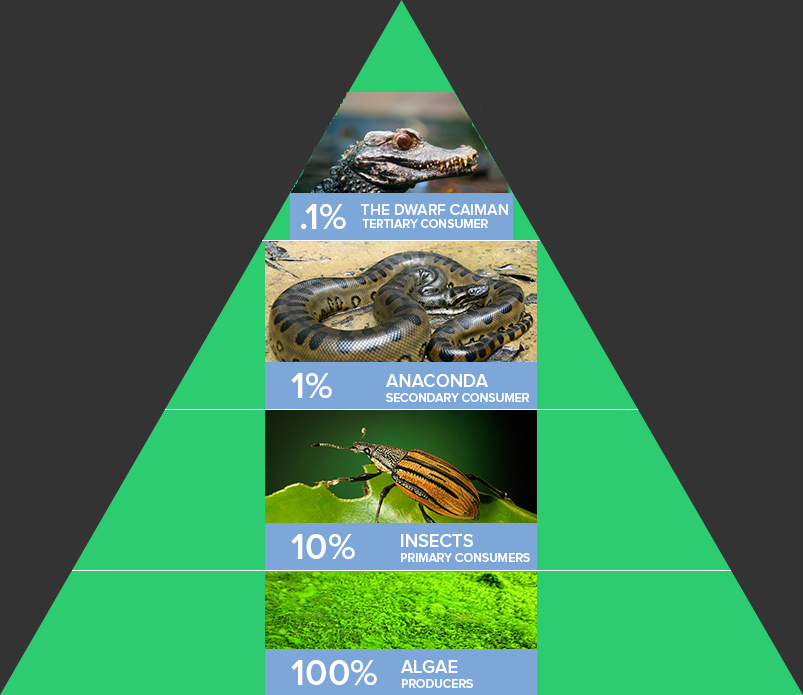
<style>
.page{position:relative;width:803px;height:695px;background:#333333}
.page>*{position:absolute;margin:0}
.t1{font:36.8px "ProximaNova-Semibold";color:#ffffff}
.t2{font:15.3px "ProximaNova-Semibold";color:#ffffff}
.t3{font:12.2px "ProximaNova-Semibold";color:#ffffff}
.t4{font:18.4px "ProximaNova-Semibold";color:#ffffff}
</style>
<div class="page">
<p class="t1" style="left:301px;top:204px;width:45px;height:25px">.1%</p>
<p class="t2" style="left:360px;top:204px;width:148px;height:11px">THE DWARF CAIMAN</p>
<p class="t3" style="left:362px;top:219px;width:126px;height:9px">TERTIARY CONSUMER</p>
<p class="t1" style="left:291px;top:373px;width:41px;height:25px">1%</p>
<p class="t4" style="left:386px;top:374px;width:102px;height:13px">ANACONDA</p>
<p class="t3" style="left:386px;top:393px;width:143px;height:9px">SECONDARY CONSUMER</p>
<p class="t1" style="left:291px;top:534px;width:64px;height:25px">10%</p>
<p class="t4" style="left:401px;top:534px;width:72px;height:13px">INSECTS</p>
<p class="t3" style="left:401px;top:553px;width:129px;height:9px">PRIMARY CONSUMERS</p>
<p class="t1" style="left:291px;top:660px;width:86px;height:25px">100%</p>
<p class="t4" style="left:401px;top:660px;width:57px;height:13px">ALGAE</p>
<p class="t3" style="left:402px;top:679px;width:71px;height:9px">PRODUCERS</p>
</div>
